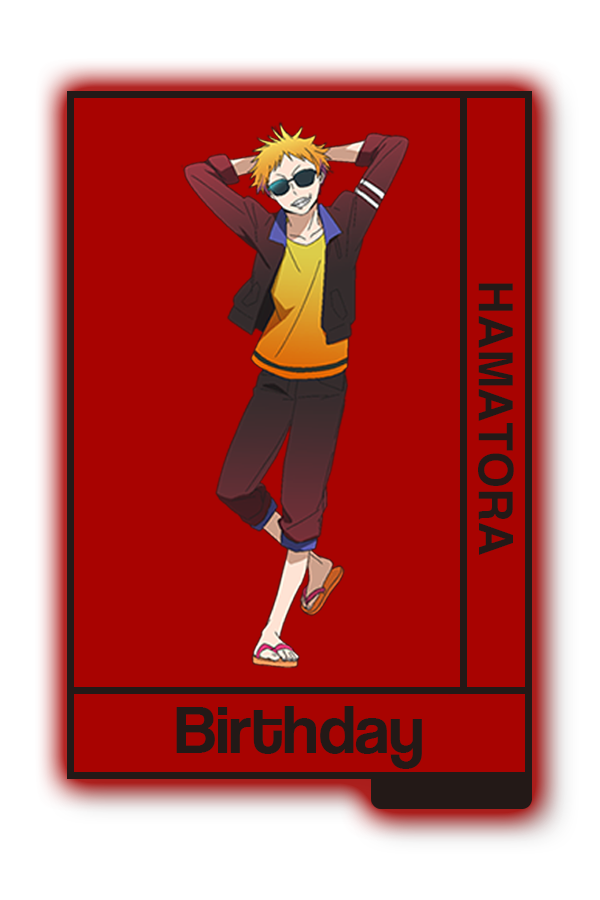
<style>
.page{position:relative;width:600px;height:900px;background:#a80301}
.page>*{position:absolute;margin:0}
.t1{font:47.4px "Helvetica-Bold";color:#231917}
.t2{font:70.1px "CoolveticaRg-Regular";color:#231917}
</style>
<div class="page">
<p class="t1" style="left:478px;top:283px;width:36px;height:272px;rotate:90deg">HAMATORA</p>
<p class="t2" style="left:176px;top:706px;width:246px;height:63px">Birthday</p>
</div>
